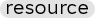
<style>
.page{position:relative;width:95px;height:18px;background:#e3e3e3}
.page>*{position:absolute;margin:0}
.t1{font:19px "BuilderSans-Regular";letter-spacing:0.03em;color:#000000;scale:1.05 1}
</style>
<div class="page">
<p class="t1" style="left:7px;top:4px;width:81px;height:10px">resource</p>
</div>
